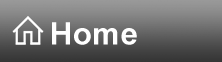
<style>
.page{position:relative;width:222px;height:62px}
.page>*{position:absolute;margin:0}
.t1{font:31px "Arial-BoldMT";letter-spacing:0.02em;color:#ffffff}
</style>
<div class="page">
<p class="t1" style="left:52px;top:22px;width:85px;height:23px">Home</p>
</div>
